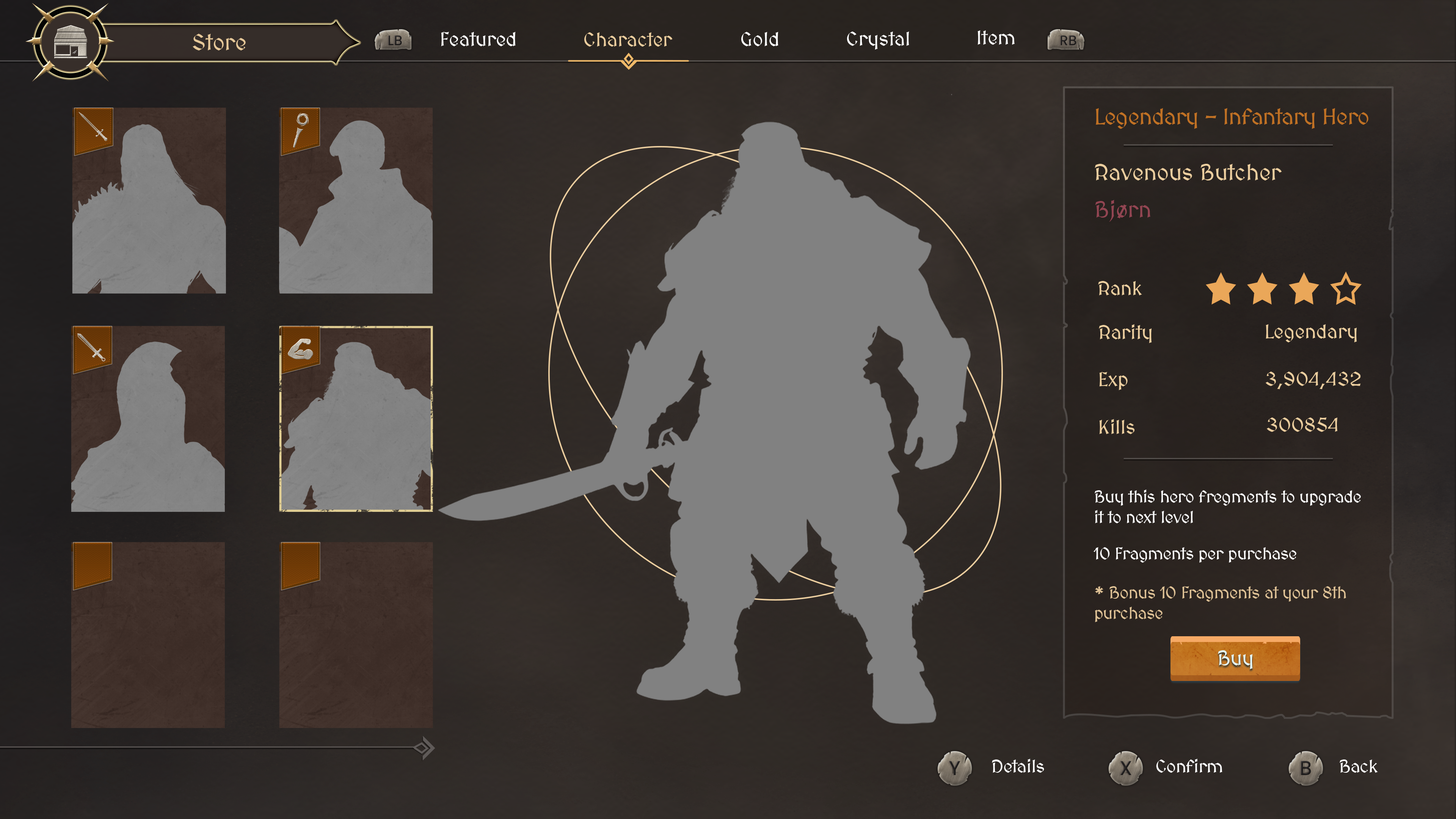
<style>
.page{position:relative;width:1456px;height:819px}
.page>*{position:absolute;margin:0}
.t1{font:22.7px "MedievalSharp";color:#e6c899}
.t2{font:19.8px "MedievalSharp";color:#ffffff}
.t3{font:19.8px "MedievalSharp";color:#ebcd9e}
.t4{font:22.7px "MedievalSharp";letter-spacing:-0.02em;color:#c07124}
.t5{font:22.7px "MedievalSharp";color:#ecce9f}
.t6{font:22.7px "MedievalSharp";color:#924552}
.t7{font:19.7px "MedievalSharp";color:#ecce9f}
.t8{font:17.1px "MedievalSharp";letter-spacing:-0.02em;color:#ffffff}
.t9{font:17.1px "MedievalSharp";letter-spacing:-0.02em;color:#dfc296}
.t10{font:20.5px "MedievalSharp";color:#e5fbfd}
.t11{font:18.2px "MedievalSharp";letter-spacing:-0.02em;color:#ffffff}
</style>
<div class="page">
<p class="t1" style="left:193px;top:34px;width:53px;height:16px">Store</p>
<p class="t2" style="left:441px;top:32px;width:75px;height:14px">Featured</p>
<p class="t3" style="left:584px;top:32px;width:89px;height:15px">Character</p>
<p class="t2" style="left:741px;top:32px;width:37px;height:14px">Gold</p>
<p class="t2" style="left:847px;top:31px;width:62px;height:19px">Crystal</p>
<p class="t2" style="left:977px;top:30px;width:38px;height:15px">Item</p>
<p class="t4" style="left:1096px;top:108px;width:272px;height:21px">Legendary - Infantary Hero</p>
<p class="t5" style="left:1095px;top:164px;width:187px;height:16px">Ravenous Butcher</p>
<p class="t6" style="left:1095px;top:200px;width:55px;height:22px">Bjørn</p>
<p class="t7" style="left:1098px;top:281px;width:44px;height:14px">Rank</p>
<p class="t7" style="left:1099px;top:324px;width:53px;height:19px">Rarity</p>
<p class="t7" style="left:1266px;top:324px;width:91px;height:18px">Legendary</p>
<p class="t7" style="left:1099px;top:372px;width:29px;height:18px">Exp</p>
<p class="t7" style="left:1266px;top:372px;width:95px;height:17px">3,904,432</p>
<p class="t7" style="left:1099px;top:419px;width:35px;height:15px">Kills</p>
<p class="t7" style="left:1267px;top:417px;width:71px;height:15px">300854</p>
<p class="t8" style="left:1095px;top:489px;width:266px;height:34px">Buy this hero fregments to upgrade it to next level</p>
<p class="t8" style="left:1093px;top:547px;width:203px;height:16px">10 Fragments per purchase</p>
<p class="t9" style="left:1095px;top:586px;width:251px;height:36px">* Bonus 10 Fragments at your 8th purchase</p>
<p class="t10" style="left:1218px;top:650px;width:35px;height:19px">Buy</p>
<p class="t11" style="left:992px;top:759px;width:52px;height:14px">Details</p>
<p class="t11" style="left:1156px;top:759px;width:66px;height:14px">Confirm</p>
<p class="t11" style="left:1340px;top:759px;width:38px;height:14px">Back</p>
</div>
